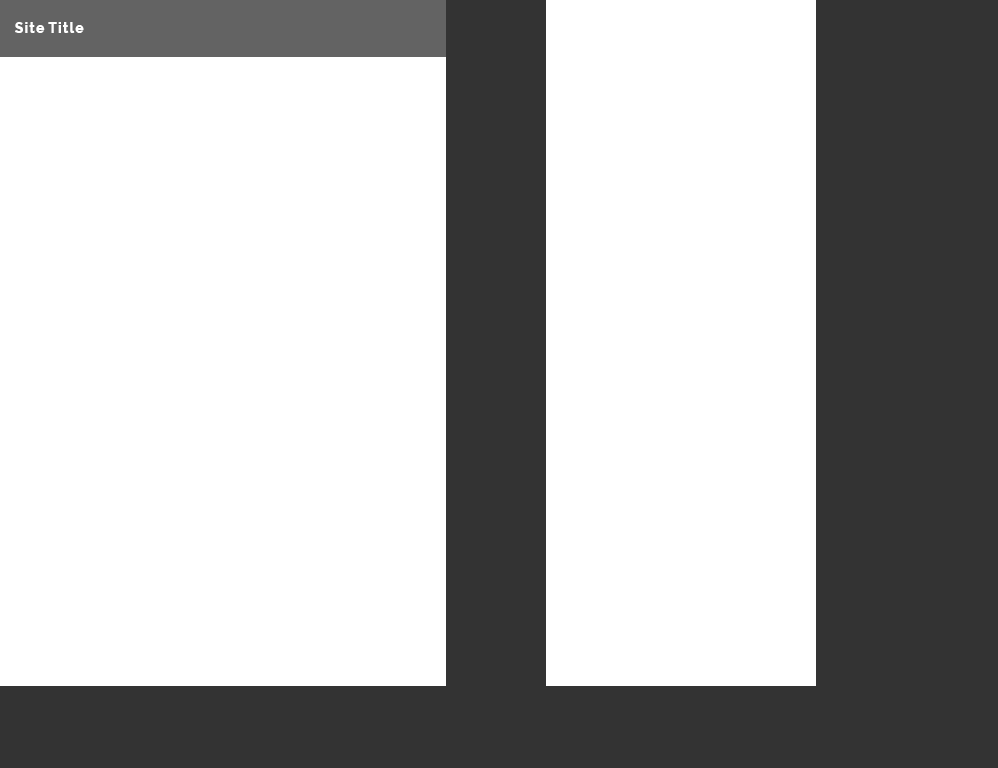
<style>
.page{position:relative;width:998px;height:768px;background:#ffffff}
.page>*{position:absolute;margin:0}
.t1{font:14px "Raleway-ExtraBold";letter-spacing:0.05em;color:#ffffff}
</style>
<div class="page">
<p class="t1" style="left:15px;top:22px;width:69px;height:11px">Site Title</p>
</div>
